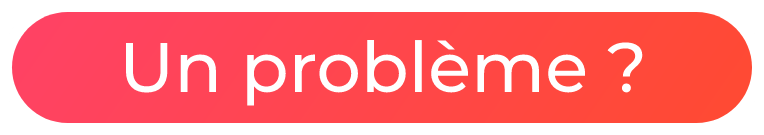
<style>
.page{position:relative;width:764px;height:135px;background:#ffffff}
.page>*{position:absolute;margin:0}
.t1{font:70px "Montserrat-Medium";color:#ffffff}
</style>
<div class="page">
<p class="t1" style="left:125px;top:40px;width:518px;height:66px">Un problème ?</p>
</div>
